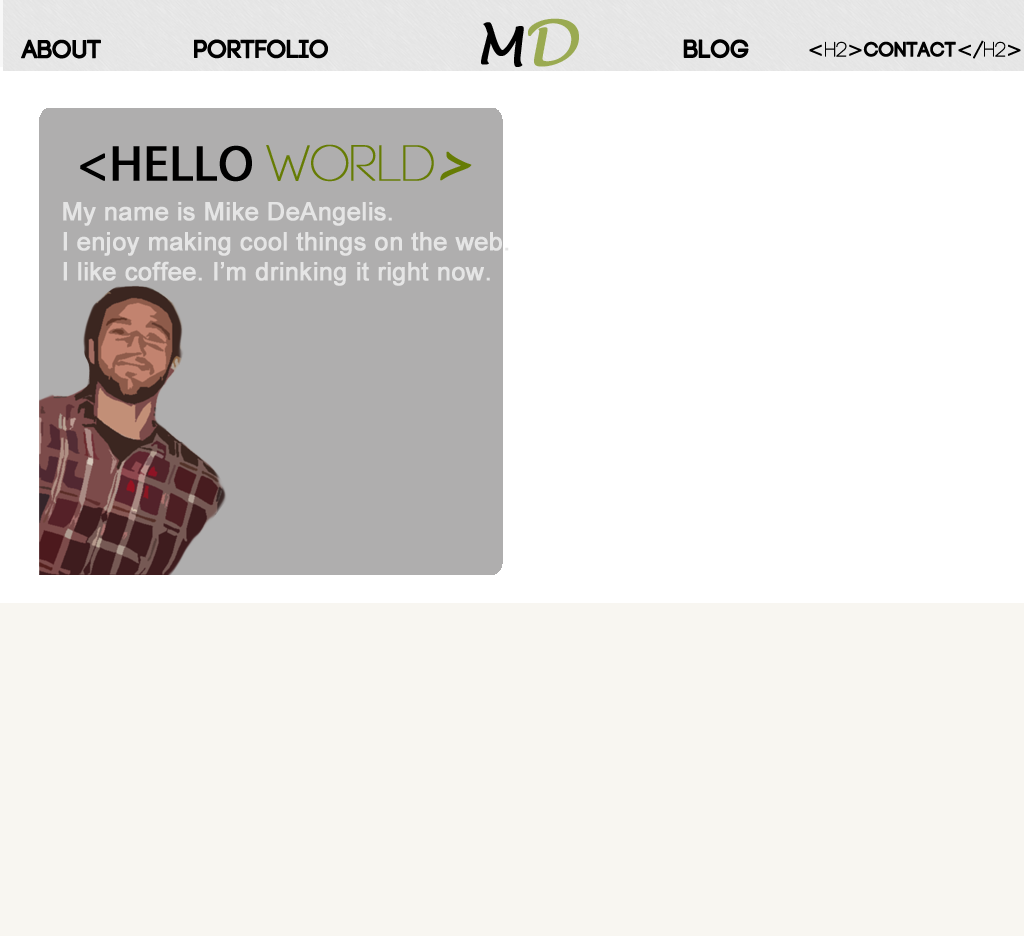
<style>
.page{position:relative;width:1024px;height:936px;background:#f8f6f1}
.page>*{position:absolute;margin:0}
.t1{font:50px "LucidaHandwriting-Italic";color:#000000;font-weight:bold}
.t2{font:60px "LucidaHandwriting-Italic";color:#9aaa51;font-weight:bold}
.t3{font:25px "Code-Bold";color:#000000;font-weight:bold}
.t4{font:20px "Code-Bold";color:#000000;font-weight:bold}
.t5{font:20px "IowanOldStyle-Roman";color:#000000;font-weight:bold}
.t6{font:20px "Code-Light";color:#000000;font-weight:bold}
.t7{font:50px "MyriadPro-Regular";color:#000000;font-weight:bold}
.t8{font:50px "Code-Light";color:#667c04;font-weight:bold}
.t9{font:50px "LucidaHandwriting-Italic";color:#667c04;font-weight:bold}
.t10{font:25px "ArialMT";color:#e5e5e5;font-weight:bold}
</style>
<div class="page">
<p class="t1" style="left:481px;top:18px;width:98px;height:49px">M<span class="t2">D</span></p>
<p class="t3" style="left:21px;top:39px;width:80px;height:20px">ABOUT</p>
<p class="t3" style="left:194px;top:39px;width:134px;height:20px">PORTFOLIO</p>
<p class="t3" style="left:683px;top:39px;width:66px;height:20px">BLOG</p>
<p class="t4" style="left:809px;top:40px;width:212px;height:19px"><span class="t5">&lt;</span><span class="t6">h2</span><span class="t5">&gt;</span>CONTACT<span class="t5">&lt;/</span><span class="t6">h2</span><span class="t5">&gt;</span></p>
<p class="t7" style="left:80px;top:144px;width:392px;height:38px">&lt;HELLO <span class="t8">WORLD</span><span class="t9">&gt;</span></p>
<p class="t10" style="left:63px;top:202px;width:446px;height:84px">My name is Mike DeAngelis.<br>I enjoy making cool things on the web.<br>I like coffee. I’m drinking it right now.</p>
</div>
